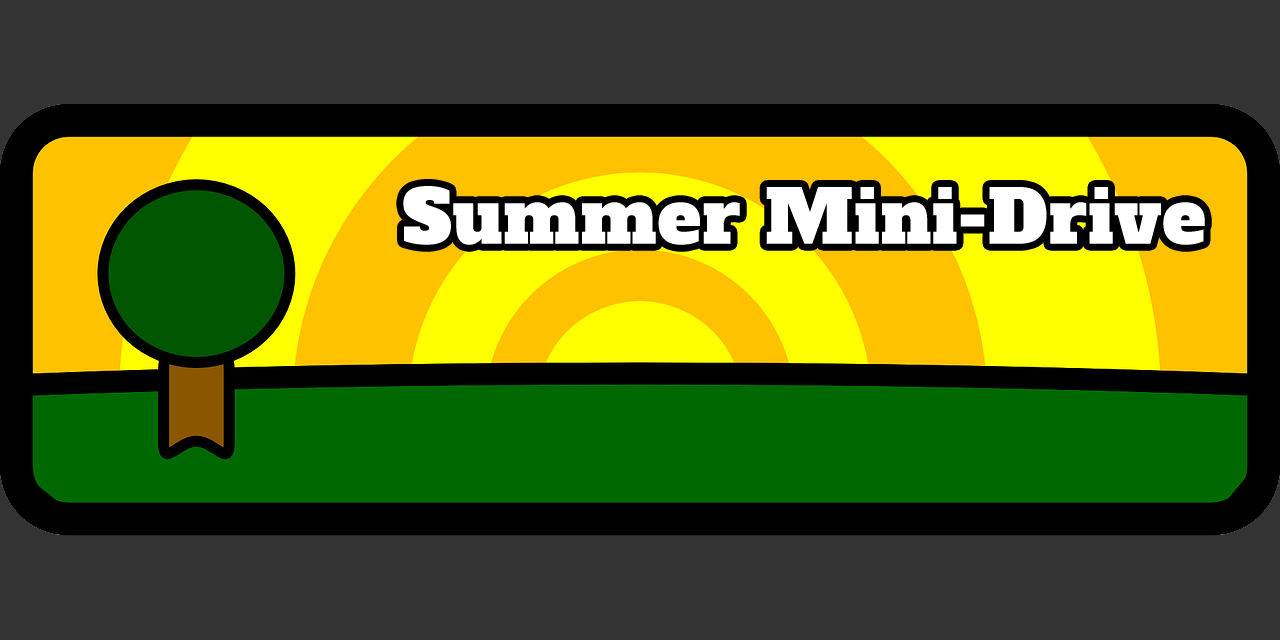
<style>
.page{position:relative;width:1280px;height:640px;background:#333333}
.page>*{position:absolute;margin:0}
.t1{font:73px "AlfaSlabOne-Regular";letter-spacing:0.018em;color:#ffffff}
.t2{font:62px "AlfaSlabOne-Regular";letter-spacing:0.018em;color:#006600}
</style>
<div class="page">
<p class="t1" style="left:403px;top:186px;width:802px;height:59px"><span class="t2"> </span>Summer Mini-Drive</p>
</div>
